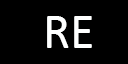
<style>
.page{position:relative;width:128px;height:64px;background:#000000}
.page>*{position:absolute;margin:0}
.t1{font:50px "Calibri";color:#feffff}
</style>
<div class="page">
<p class="t1" style="left:47px;top:16px;width:45px;height:32px">RE</p>
</div>
